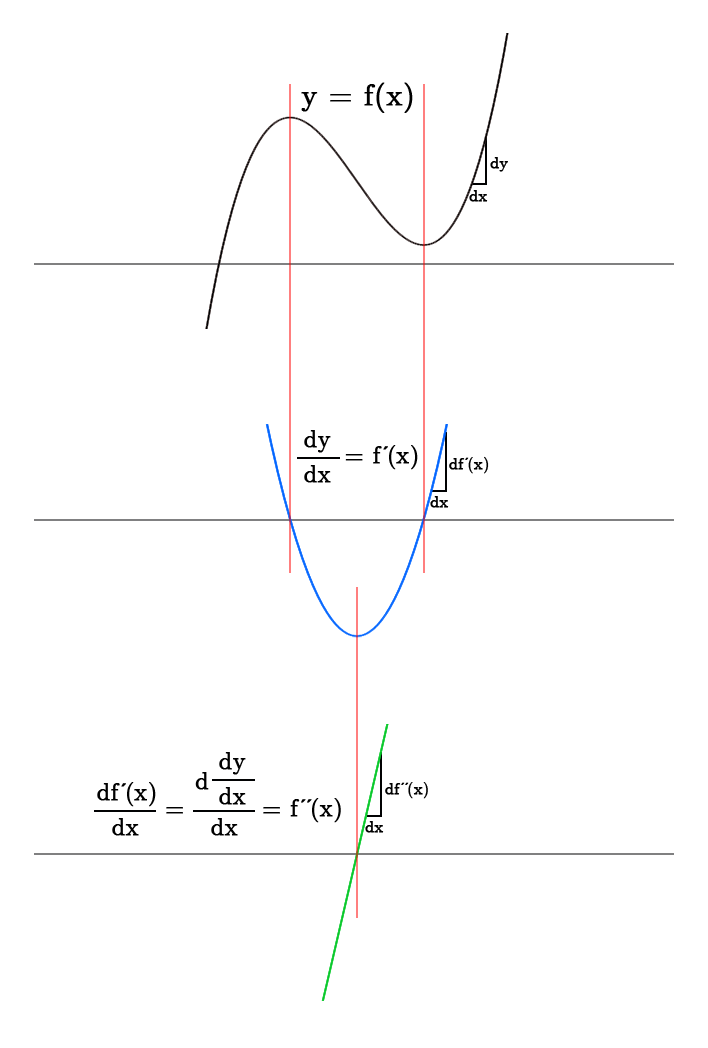
<style>
.page{position:relative;width:708px;height:1048px;background:#ffffff}
.page>*{position:absolute;margin:0}
.t1{font:30px "CMUSerif-Roman";color:#000000;font-weight:bold}
.t2{font:16px "CMUSerif-Roman";color:#000000;font-weight:bold}
.t3{font:24px "CMUSerif-Roman";color:#000000;font-weight:bold}
.t4{font:24px "Gulim";letter-spacing:-0.16em;color:#000000;font-weight:bold}
.t5{font:16px "Gulim";letter-spacing:-0.16em;color:#000000;font-weight:bold}
</style>
<div class="page">
<p class="t1" style="left:301px;top:82px;width:112px;height:31px">y = f(x)</p>
<p class="t2" style="left:490px;top:157px;width:18px;height:15px">dy</p>
<p class="t2" style="left:469px;top:190px;width:19px;height:12px">dx</p>
<p class="t3" style="left:304px;top:430px;width:27px;height:23px">dy</p>
<p class="t3" style="left:345px;top:445px;width:73px;height:25px">= f<span class="t4">′</span>(x)</p>
<p class="t2" style="left:449px;top:456px;width:40px;height:18px">df<span class="t5">′</span>(x)</p>
<p class="t3" style="left:304px;top:465px;width:27px;height:18px">dx</p>
<p class="t2" style="left:430px;top:496px;width:19px;height:12px">dx</p>
<p class="t3" style="left:219px;top:752px;width:27px;height:23px">dy</p>
<p class="t3" style="left:195px;top:772px;width:14px;height:18px">d</p>
<p class="t3" style="left:97px;top:782px;width:59px;height:25px">df<span class="t4">′</span>(x)</p>
<p class="t2" style="left:385px;top:782px;width:43px;height:17px">df<span class="t5">′′</span>(x)</p>
<p class="t3" style="left:166px;top:798px;width:175px;height:25px">=         = f<span class="t4">′′</span>(x)</p>
<p class="t3" style="left:219px;top:787px;width:27px;height:18px">dx</p>
<p class="t3" style="left:112px;top:818px;width:27px;height:18px">dx</p>
<p class="t3" style="left:211px;top:818px;width:27px;height:18px">dx</p>
<p class="t2" style="left:365px;top:821px;width:19px;height:12px">dx</p>
</div>
